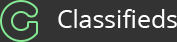
<style>
.page{position:relative;width:177px;height:42px;background:#333333}
.page>*{position:absolute;margin:0}
.t1{font:25px "OpenSans";color:#ffffff}
</style>
<div class="page">
<p class="t1" style="left:58px;top:9px;width:119px;height:19px">Classifieds</p>
</div>
